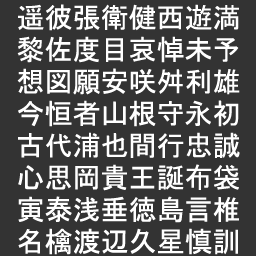
<style>
.page{position:relative;width:256px;height:256px;background:#333333}
.page>*{position:absolute;margin:0}
.t1{font:28px "MS-Gothic";color:#ffffff}
</style>
<div class="page">
<p class="t1" style="left:17px;top:4px;width:223px;height:251px">遥彼張衛健西遊満<br>黎佐度目哀悼未予<br>想図願安咲舛利雄<br>今恒者山根守永初<br>古代浦也間行忠誠<br>心思岡貴王誕布袋<br>寅泰浅垂徳島言椎<br>名檎渡辺久星慎訓</p>
</div>
